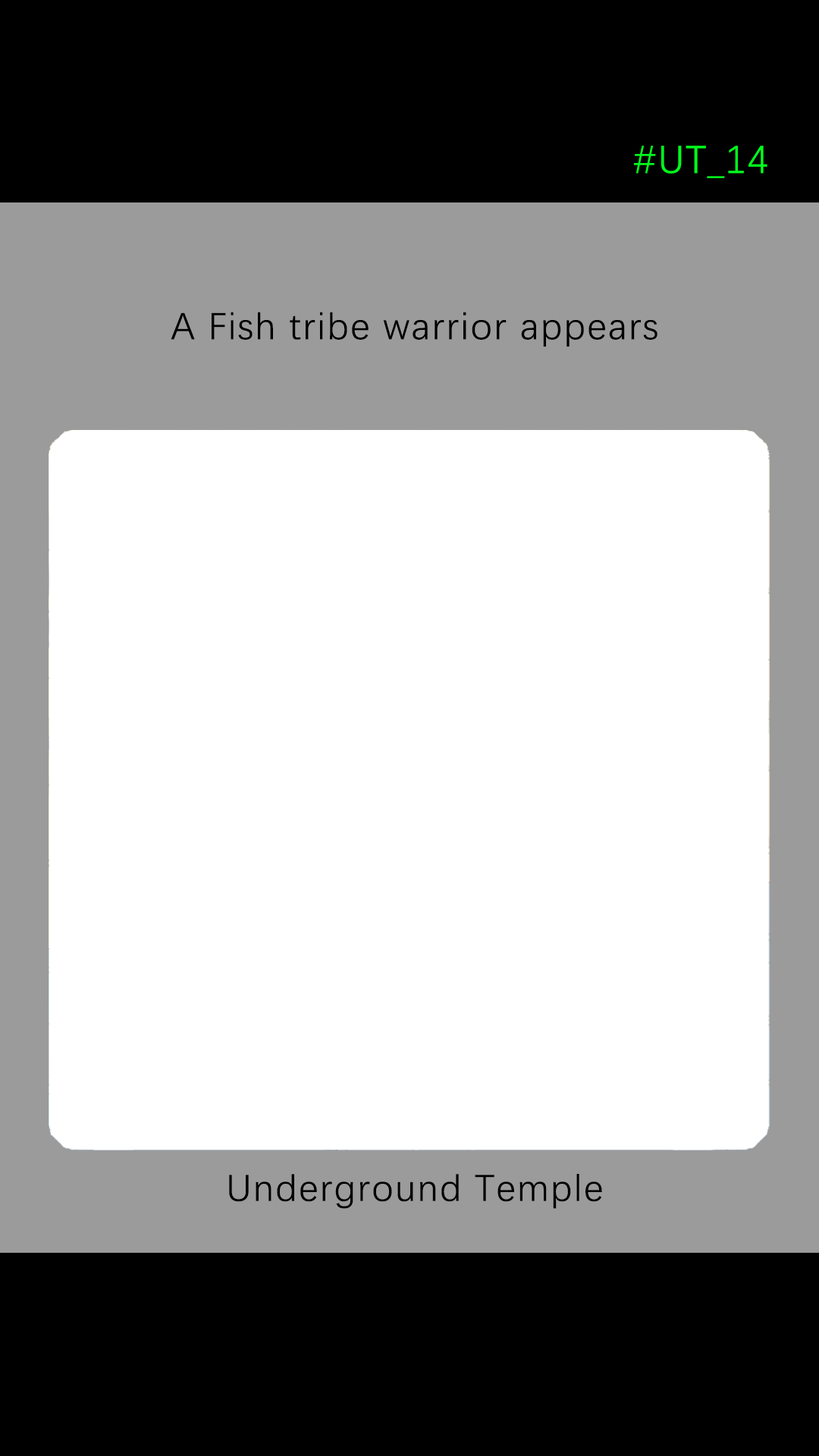
<style>
.page{position:relative;width:819px;height:1456px;background:#ffffff}
.page>*{position:absolute;margin:0}
.t1{font:39.2px "DengXian-Regular";letter-spacing:0.04em;color:#00ff1e}
.t2{font:37.9px "DengXian-Regular";letter-spacing:0.04em;color:#000000}
</style>
<div class="page">
<p class="t1" style="left:634px;top:146px;width:133px;height:32px">#UT_14</p>
<p class="t2" style="left:171px;top:312px;width:486px;height:35px">A Fish tribe warrior appears</p>
<p class="t2" style="left:229px;top:1174px;width:373px;height:35px">Underground Temple</p>
</div>
